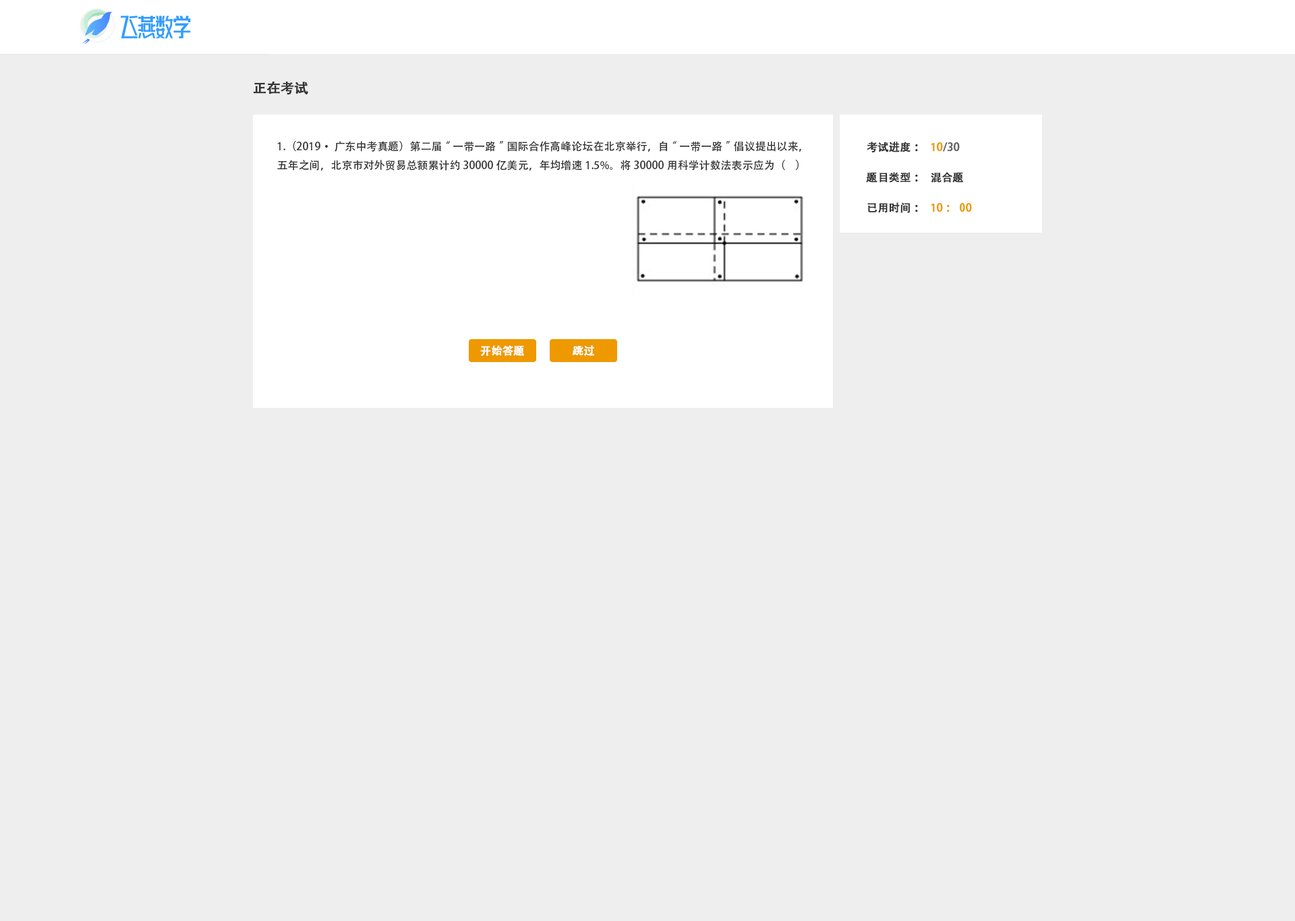
<style>
.page{position:relative;width:1295px;height:921px;background:#eeeeee}
.page>*{position:absolute;margin:0}
.t1{font:13.5px "AdobeHeitiStd-Regular";color:#333333;font-weight:bold}
.t2{font:10.8px "AdobeHeitiStd-Regular";color:#333333}
.t3{font:10.8px "AdobeHeitiStd-Regular";color:#333333;font-weight:bold}
.t4{font:10.8px "AdobeHeitiStd-Regular";color:#666666;font-weight:bold}
.t5{font:10.8px "AdobeHeitiStd-Regular";color:#ee9900;font-weight:bold}
.t6{font:10.8px "AdobeHeitiStd-Regular";color:#ffffff;font-weight:bold}
</style>
<div class="page">
<p class="t1" style="left:254px;top:81px;width:54px;height:14px">正在考试</p>
<p class="t2" style="left:277px;top:141px;width:524px;height:30px">1.（2019·广东中考真题）第二届“一带一路”国际合作高峰论坛在北京举行，自“一带一路”倡议提出以来，五年之间，北京市对外贸易总额累计约30000亿美元，年均增速1.5%。将30000用科学计数法表示应为（    ）</p>
<p class="t3" style="left:866px;top:142px;width:52px;height:11px">考试进度：</p>
<p class="t4" style="left:931px;top:142px;width:29px;height:10px"><span class="t5">１0</span>/30</p>
<p class="t3" style="left:866px;top:172px;width:52px;height:11px">题目类型：</p>
<p class="t3" style="left:931px;top:172px;width:33px;height:11px">混合题</p>
<p class="t3" style="left:867px;top:202px;width:51px;height:11px">已用时间：</p>
<p class="t5" style="left:931px;top:203px;width:41px;height:9px">１0：00</p>
<p class="t6" style="left:480px;top:345px;width:45px;height:11px">开始答题</p>
<p class="t6" style="left:572px;top:345px;width:23px;height:11px">跳过</p>
</div>
